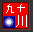
<style>
.page{position:relative;width:33px;height:32px;background:#f20000}
.page>*{position:absolute;margin:0}
.t1{font:10.4px "SimSun";color:#ffffff}
.t2{font:11.7px "SimSun";color:#ffffff}
</style>
<div class="page">
<p class="t1" style="left:6px;top:4px;width:19px;height:9px">九十</p>
<p class="t2" style="left:16px;top:15px;width:11px;height:12px">川</p>
</div>
